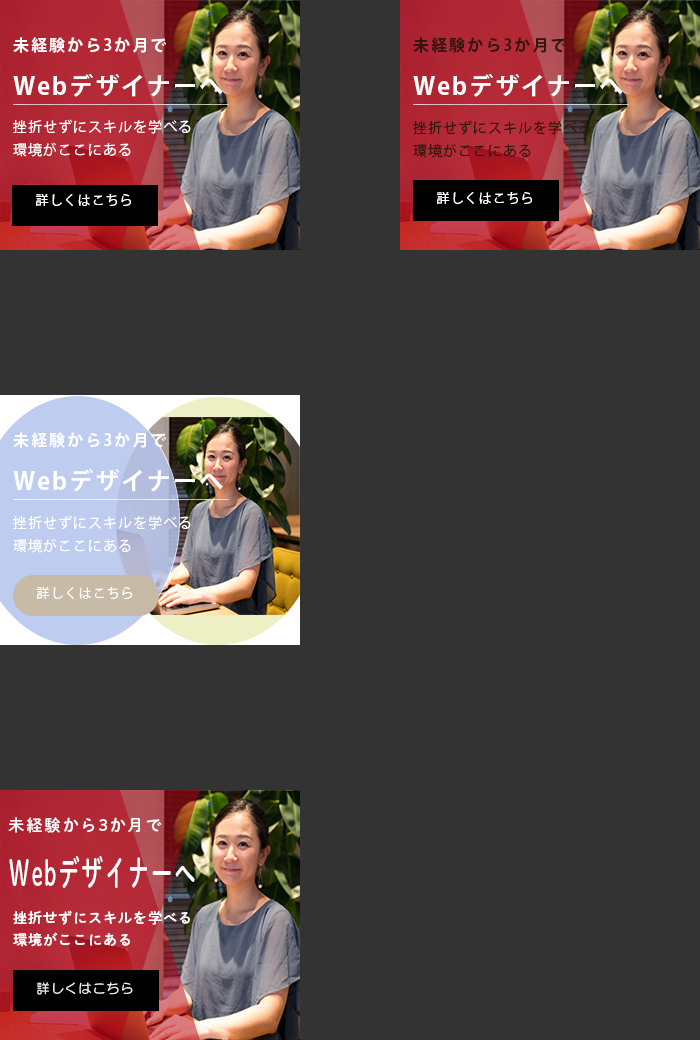
<style>
.page{position:relative;width:700px;height:1040px;background:#333333}
.page>*{position:absolute;margin:0}
.t1{font:16px "KozGoPr6N-Bold";letter-spacing:0.1em;color:#ffffff}
.t2{font:16px "KozGoPr6N-Bold";letter-spacing:0.1em;color:#301710}
.t3{font:24px "KozGoPr6N-Bold";letter-spacing:0.08em;color:#ffffff}
.t4{font:14px/22.4px "KozGoPr6N-Regular";letter-spacing:0.08em;color:#ffffff}
.t5{font:14px/22.4px "KozGoPr6N-Regular";letter-spacing:0.08em;color:#301710}
.t6{font:13px "KozGoPr6N-Regular";letter-spacing:0.1em;color:#ffffff}
.t7{font:16px "DNPShueiMGoStd-B";letter-spacing:0.1em;color:#ffffff}
.t8{font:35.1px "DNPShueiMGoStd-B";letter-spacing:0.08em;color:#ffffff;scale:0.61 1}
.t9{font:14px/22.4px "DNPShueiMGoStd-B";letter-spacing:0.08em;color:#ffffff}
.t10{font:13px "HGMaruGothicMPRO";letter-spacing:0.1em;color:#ffffff}
</style>
<div class="page">
<p class="t1" style="left:13px;top:37px;width:153px;height:16px">未経験から3か月で</p>
<p class="t2" style="left:413px;top:37px;width:153px;height:16px">未経験から3か月で</p>
<p class="t3" style="left:13px;top:73px;width:210px;height:24px">Webデザイナーへ</p>
<p class="t3" style="left:413px;top:73px;width:210px;height:24px">Webデザイナーへ</p>
<p class="t4" style="left:13px;top:119px;width:178px;height:38px">挫折せずにスキルを学べる<br>環境がここにある</p>
<p class="t5" style="left:413px;top:120px;width:178px;height:38px">挫折せずにスキルを学べる<br>環境がここにある</p>
<p class="t6" style="left:36px;top:194px;width:95px;height:12px">詳しくはこちら</p>
<p class="t6" style="left:437px;top:192px;width:95px;height:12px">詳しくはこちら</p>
<p class="t1" style="left:13px;top:432px;width:153px;height:16px">未経験から3か月で</p>
<p class="t3" style="left:13px;top:468px;width:210px;height:24px">Webデザイナーへ</p>
<p class="t4" style="left:13px;top:515px;width:178px;height:38px">挫折せずにスキルを学べる<br>環境がここにある</p>
<p class="t6" style="left:37px;top:587px;width:95px;height:12px">詳しくはこちら</p>
<p class="t7" style="left:8px;top:817px;width:154px;height:16px">未経験から3か月で</p>
<p class="t8" style="left:9px;top:855px;width:186px;height:33px">Webデザイナーへ</p>
<p class="t9" style="left:13px;top:910px;width:177px;height:37px">挫折せずにスキルを学べる<br>環境がここにある</p>
<p class="t10" style="left:37px;top:982px;width:96px;height:13px">詳しくはこちら</p>
</div>
